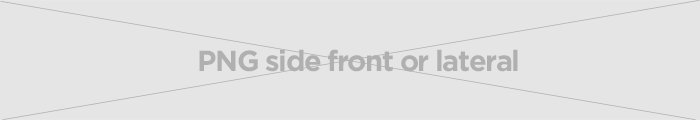
<style>
.page{position:relative;width:700px;height:120px;background:#e5e5e5}
.page>*{position:absolute;margin:0}
.t1{font:29px "GothamBold";letter-spacing:-0.05em;color:#b1b0b0}
</style>
<div class="page">
<p class="t1" style="left:199px;top:49px;width:319px;height:23px">PNG side front or lateral</p>
</div>
